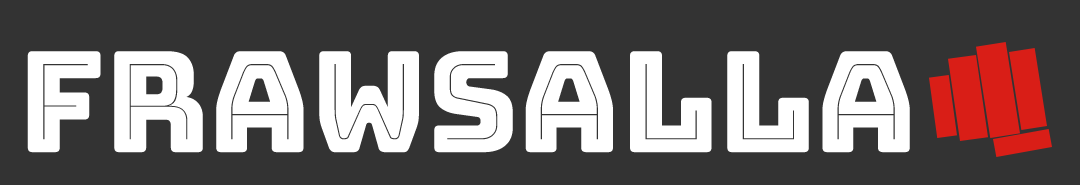
<style>
.page{position:relative;width:1080px;height:185px;background:#333333}
.page>*{position:absolute;margin:0}
.t1{font:140px "BungeeInline-Regular";color:#ffffff}
</style>
<div class="page">
<p class="t1" style="left:27px;top:51px;width:883px;height:102px">FRAWSALLA</p>
</div>
